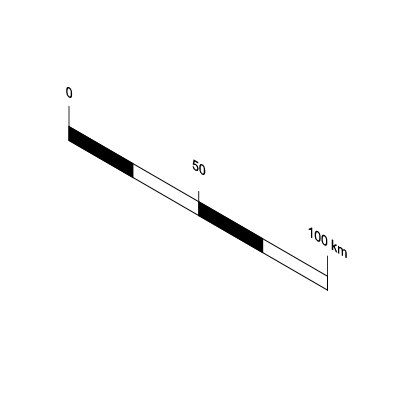
<style>
.page{position:relative;width:400px;height:400px;background:#ffffff}
.page>*{position:absolute;margin:0}
.t1{font:14px "ArialMT";color:#000000}
</style>
<div class="page">
<p class="t1" style="left:66px;top:87px;width:7px;height:11px;rotate:30deg">0</p>
<p class="t1" style="left:192px;top:159px;width:14px;height:16px;rotate:30deg">50</p>
<p class="t1" style="left:308px;top:227px;width:39px;height:31px;rotate:30deg">100 km</p>
</div>
